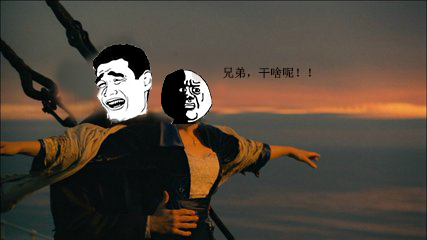
<style>
.page{position:relative;width:427px;height:240px}
.page>*{position:absolute;margin:0}
.t1{font:12px "SimSun";color:#000000}
</style>
<div class="page">
<p class="t1" style="left:223px;top:67px;width:88px;height:12px">兄弟，干啥呢！！</p>
</div>
